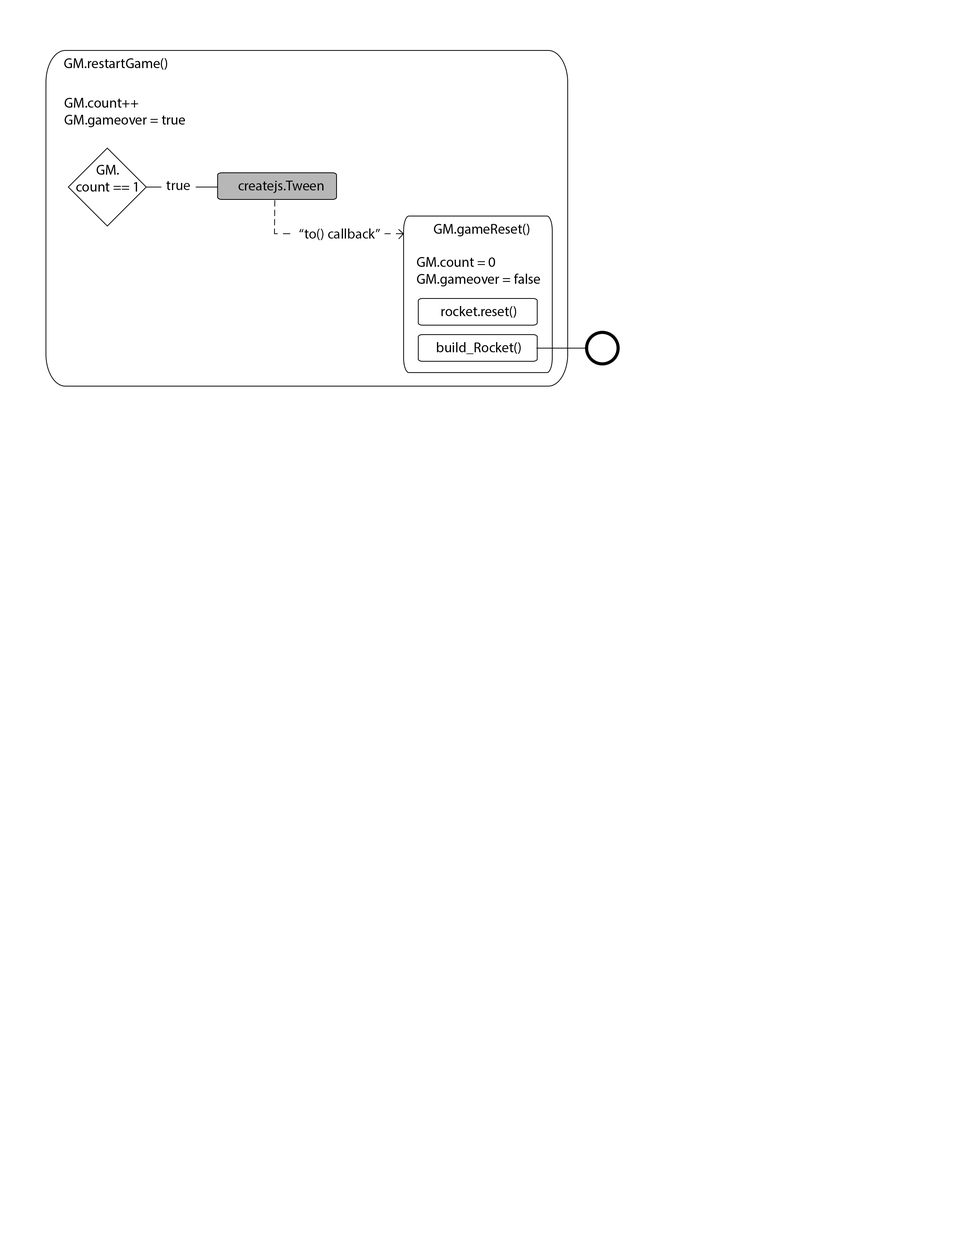
<style>
.page{position:relative;width:960px;height:1242px;background:#ffffff}
.page>*{position:absolute;margin:0}
.t1{font:14.1px "MyriadPro-Regular";color:#000000}
</style>
<div class="page">
<p class="t1" style="left:64px;top:58px;width:103px;height:12px">GM.restartGame()</p>
<p class="t1" style="left:64px;top:98px;width:121px;height:29px">GM.count++<br>GM.gameover = true</p>
<p class="t1" style="left:76px;top:165px;width:61px;height:27px;text-align:center">GM.<br>count == 1</p>
<p class="t1" style="left:166px;top:181px;width:24px;height:9px">true</p>
<p class="t1" style="left:238px;top:181px;width:86px;height:12px">createjs.Tween</p>
<p class="t1" style="left:299px;top:228px;width:81px;height:12px">“to() callback”</p>
<p class="t1" style="left:434px;top:224px;width:95px;height:12px">GM.gameReset()</p>
<p class="t1" style="left:417px;top:257px;width:123px;height:29px">GM.count = 0<br>GM.gameover = false</p>
<p class="t1" style="left:441px;top:306px;width:75px;height:12px">rocket.reset()</p>
<p class="t1" style="left:437px;top:342px;width:84px;height:12px">build_Rocket()</p>
</div>
